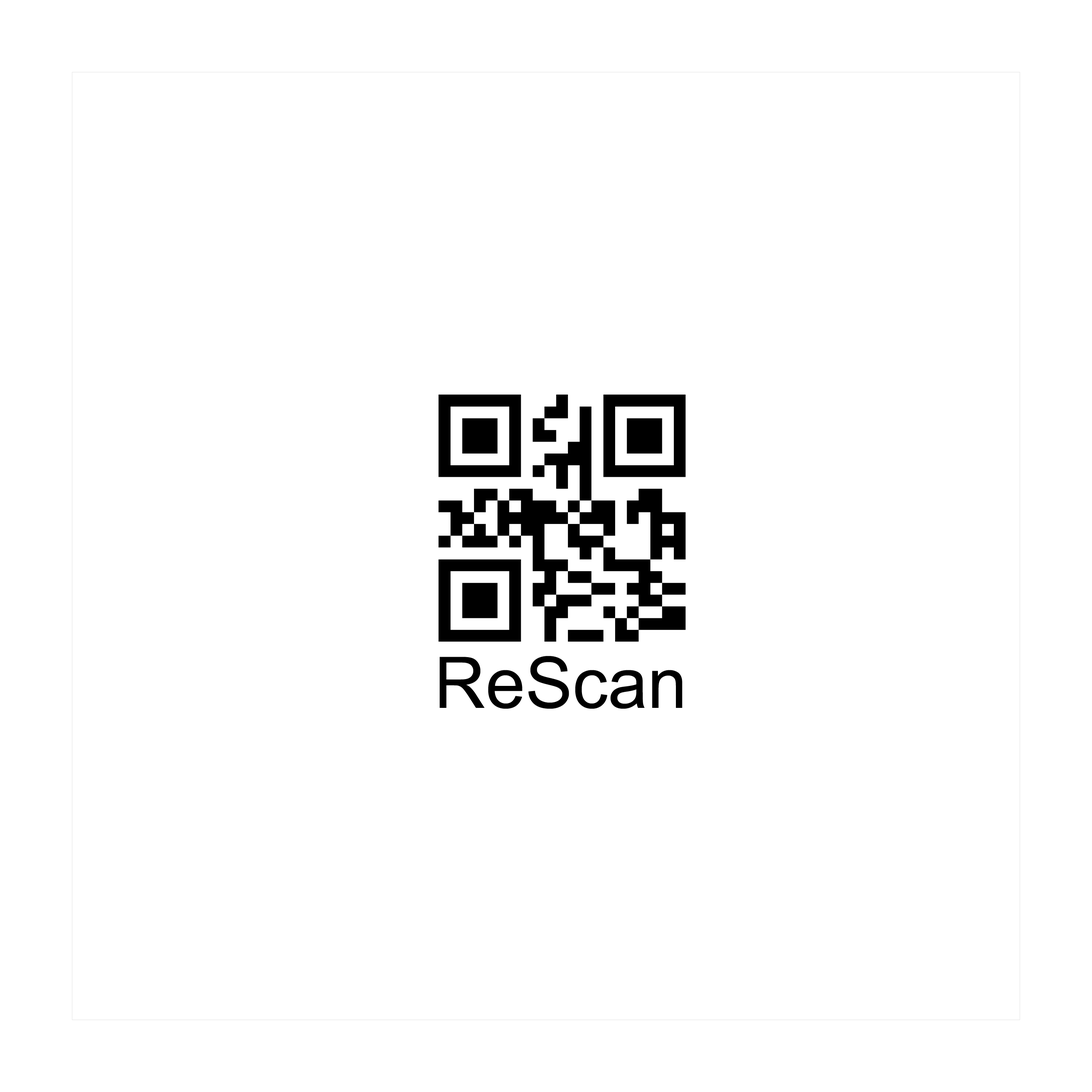
<style>
.page{position:relative;width:1092px;height:1092px;background:#ffffff}
.page>*{position:absolute;margin:0}
.t1{font:71.1px "ArialMT";color:#000000}
</style>
<div class="page">
<p class="t1" style="left:440px;top:656px;width:242px;height:53px">ReScan</p>
</div>
